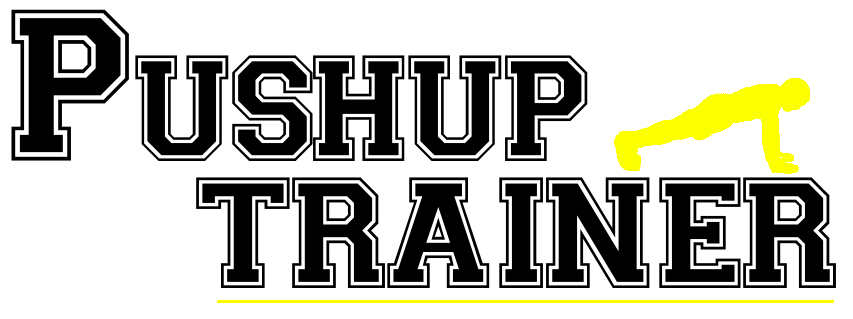
<style>
.page{position:relative;width:853px;height:319px;background:#ffffff}
.page>*{position:absolute;margin:0}
.t1{font:215.4px "Varsity-Regular";letter-spacing:-0.04em;color:#000000;font-variant:small-caps}
.t2{font:157.9px "Varsity-Regular";letter-spacing:-0.04em;color:#000000}
</style>
<div class="page">
<p class="t1" style="left:11px;top:9px;width:577px;height:152px">Pushup</p>
<p class="t2" style="left:196px;top:177px;width:640px;height:111px">TRAINER</p>
</div>
